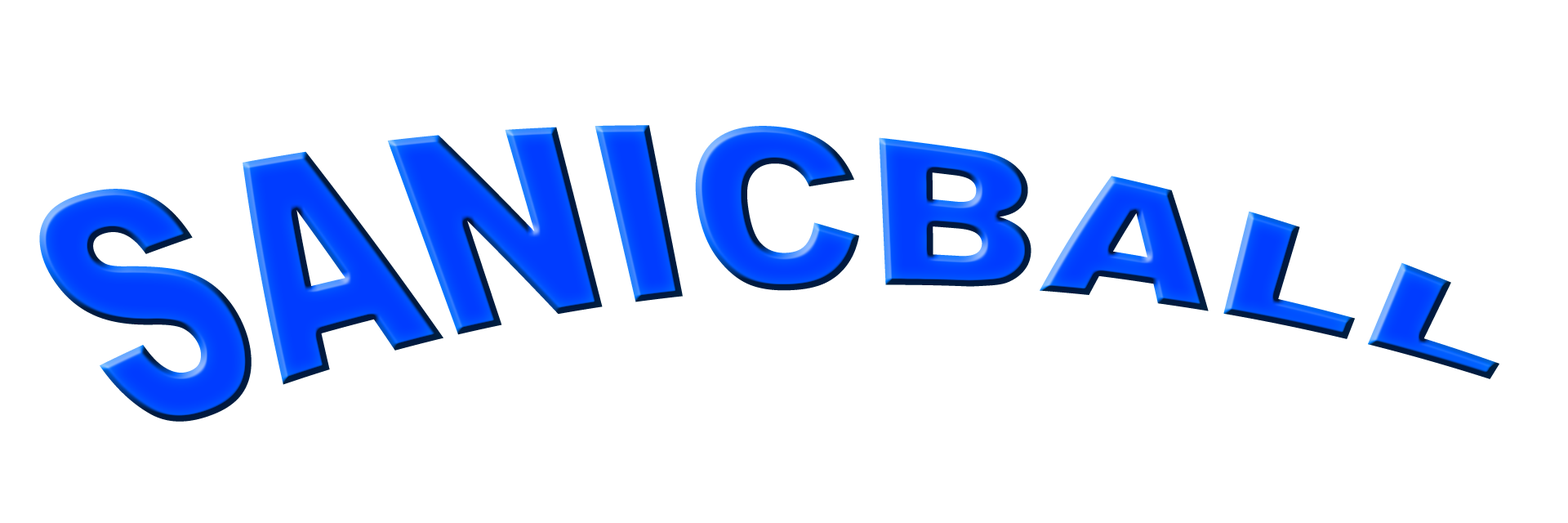
<style>
.page{position:relative;width:1568px;height:523px;background:#ffffff}
.page>*{position:absolute;margin:0}
.t1{font:209.1px "Arial-Black";color:#003cff}
</style>
<div class="page">
<p class="t1" style="left:39px;top:125px;width:1460px;height:296px">SANICBALL</p>
</div>
